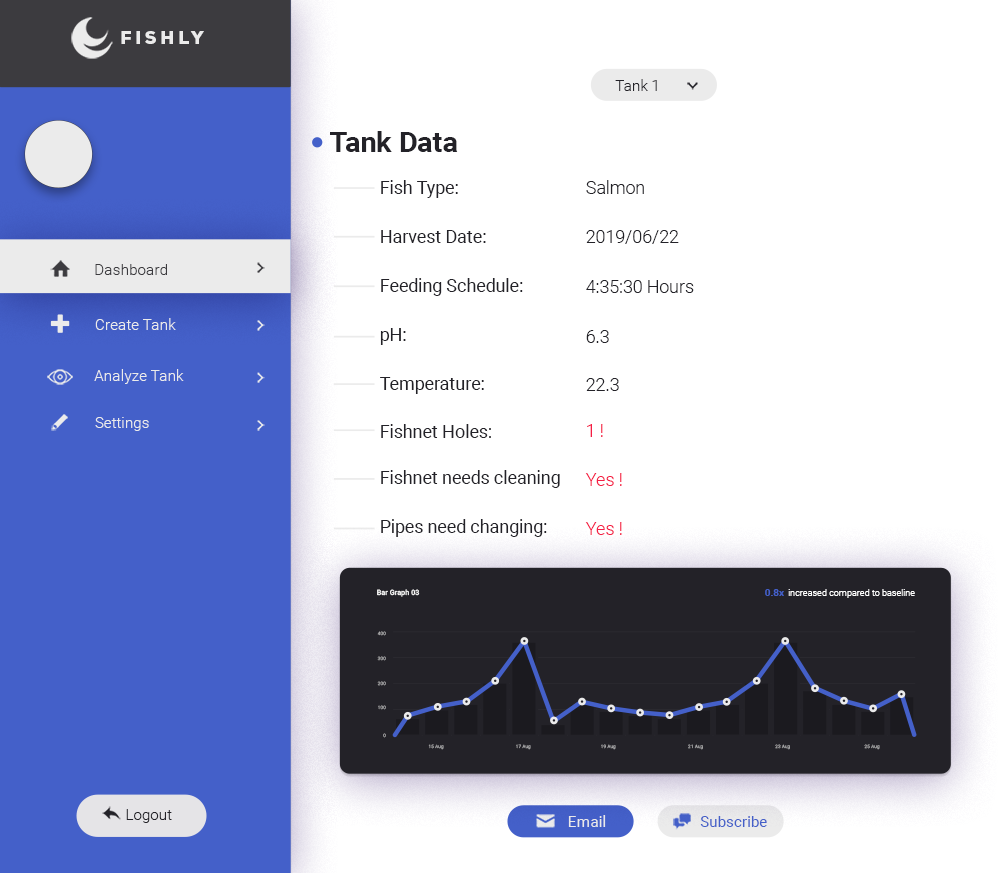
<style>
.page{position:relative;width:1000px;height:873px;background:#ffffff}
.page>*{position:absolute;margin:0}
.t1{font:17.8px "NexaBlack";letter-spacing:0.2em;color:#ebebeb}
.t2{font:15.4px "Roboto-Light";color:#232228}
.t3{font:28.5px "Roboto-Bold";color:#232228}
.t4{font:17.8px "Roboto-Regular";color:#232228}
.t5{font:17.8px "Roboto-Light";color:#232228}
.t6{font:15.4px "Roboto-Light";color:#3c3b3f}
.t7{font:15.4px "Roboto-Light";color:#ebebeb}
.t8{font:17.8px "Roboto-Light";color:#f51d45}
.t9{font:7.3px "Roboto-Medium";color:#ffffff}
.t10{font:9.1px "Roboto-Light";color:#ffffff}
.t11{font:10px "Roboto-Bold";color:#4460c9}
.t12{font:4.6px "Roboto-Light";letter-spacing:0.03em;color:#aaa9ab}
.t13{font:4.6px "Roboto-Light";letter-spacing:0.03em}
.t14{font:15.4px "Roboto-Regular";color:#ebebeb}
.t15{font:15.4px "Roboto-Regular";color:#4460c9}
</style>
<div class="page">
<p class="t1" style="left:121px;top:31px;width:83px;height:13px">FISHLY</p>
<p class="t2" style="left:615px;top:79px;width:42px;height:12px">Tank 1</p>
<p class="t3" style="left:330px;top:131px;width:128px;height:21px">Tank Data</p>
<p class="t4" style="left:381px;top:180px;width:77px;height:18px">Fish Type:</p>
<p class="t5" style="left:586px;top:180px;width:58px;height:14px">Salmon</p>
<p class="t4" style="left:381px;top:230px;width:105px;height:13px">Harvest Date:</p>
<p class="t5" style="left:586px;top:230px;width:93px;height:14px">2019/06/22</p>
<p class="t6" style="left:95px;top:264px;width:72px;height:11px">Dashboard</p>
<p class="t4" style="left:381px;top:278px;width:142px;height:18px">Feeding Schedule:</p>
<p class="t5" style="left:586px;top:280px;width:108px;height:13px">4:35:30 Hours</p>
<p class="t7" style="left:95px;top:318px;width:81px;height:12px">Create Tank</p>
<p class="t4" style="left:380px;top:328px;width:26px;height:17px">pH:</p>
<p class="t5" style="left:586px;top:330px;width:23px;height:13px">6.3</p>
<p class="t7" style="left:94px;top:369px;width:90px;height:15px">Analyze Tank</p>
<p class="t4" style="left:380px;top:377px;width:104px;height:17px">Temperature:</p>
<p class="t5" style="left:586px;top:378px;width:33px;height:13px">22.3</p>
<p class="t7" style="left:95px;top:417px;width:54px;height:14px">Settings</p>
<p class="t4" style="left:381px;top:424px;width:110px;height:14px">Fishnet Holes:</p>
<p class="t8" style="left:587px;top:424px;width:16px;height:13px">1 !</p>
<p class="t4" style="left:381px;top:470px;width:179px;height:18px">Fishnet needs cleaning</p>
<p class="t8" style="left:585px;top:473px;width:37px;height:13px">Yes !</p>
<p class="t4" style="left:381px;top:519px;width:166px;height:18px">Pipes need changing:</p>
<p class="t8" style="left:585px;top:522px;width:37px;height:13px">Yes !</p>
<p class="t9" style="left:377px;top:589px;width:43px;height:8px">Bar Graph 03</p>
<p class="t10" style="left:765px;top:589px;width:150px;height:9px"><span class="t11">0.8x  </span>increased compared to baseline</p>
<p class="t12" style="left:377px;top:631px;width:9px;height:5px">400</p>
<p class="t13" style="left:377px;top:656px;width:9px;height:5px">300</p>
<p class="t13" style="left:377px;top:681px;width:9px;height:5px">200</p>
<p class="t13" style="left:378px;top:705px;width:8px;height:5px">100</p>
<p class="t13" style="left:383px;top:733px;width:3px;height:5px">0</p>
<p class="t13" style="left:428px;top:744px;width:16px;height:6px">15 Aug</p>
<p class="t13" style="left:516px;top:744px;width:15px;height:6px">17 Aug</p>
<p class="t13" style="left:601px;top:744px;width:15px;height:6px">19 Aug</p>
<p class="t13" style="left:688px;top:744px;width:15px;height:6px">21 Aug</p>
<p class="t13" style="left:775px;top:744px;width:15px;height:6px">23 Aug</p>
<p class="t13" style="left:864px;top:744px;width:16px;height:6px">25 Aug</p>
<p class="t2" style="left:126px;top:809px;width:46px;height:14px">Logout</p>
<p class="t14" style="left:568px;top:815px;width:38px;height:12px">Email</p>
<p class="t15" style="left:700px;top:816px;width:67px;height:11px">Subscribe</p>
</div>
